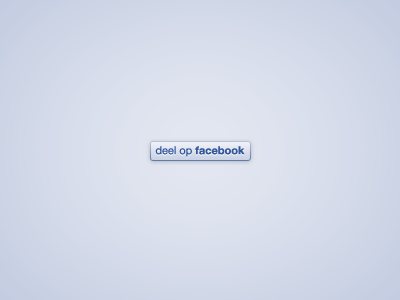
<style>
.page{position:relative;width:400px;height:300px}
.page>*{position:absolute;margin:0}
.t1{font:11px "HelveticaNeue-Bold";color:#32579b}
.t2{font:11px "HelveticaNeue";color:#32579b}
</style>
<div class="page">
<p class="t1" style="left:155px;top:146px;width:90px;height:11px"><span class="t2">deel op </span>facebook</p>
</div>
